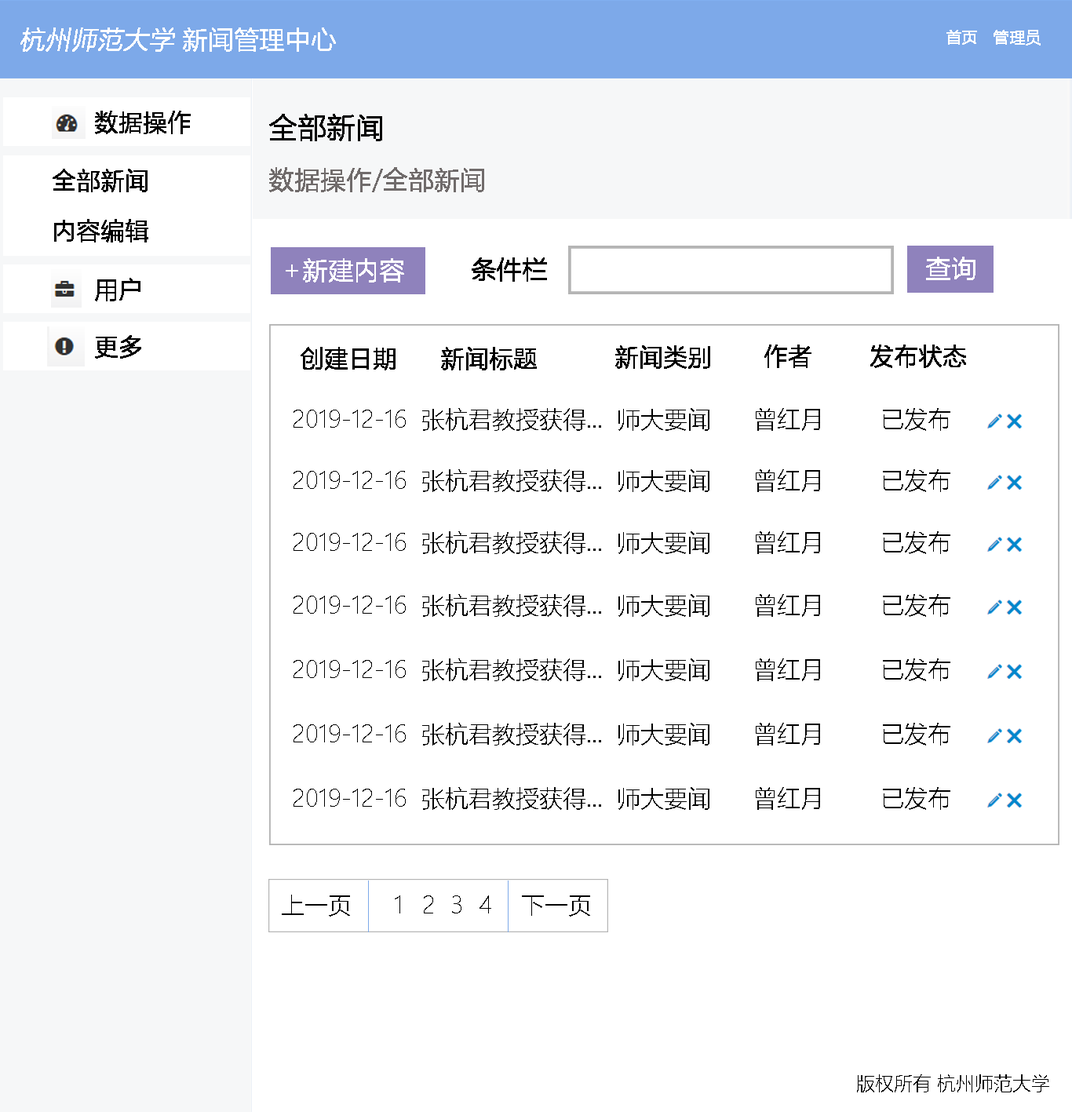
<style>
.page{position:relative;width:1072px;height:1112px;background:#ffffff}
.page>*{position:absolute;margin:0}
.t1{font:25.1px "MicrosoftYaHeiLight";color:#ffffff;font-weight:bold;font-style:italic}
.t2{font:25.1px "MicrosoftYaHeiLight";color:#ffffff;font-weight:bold}
.t3{font:15.7px "MicrosoftYaHeiLight";color:#ffffff;font-weight:bold}
.t4{font:23.5px "MicrosoftYaHeiLight";color:#000000;font-weight:bold}
.t5{font:28.3px "MicrosoftYaHeiLight";color:#000000;font-weight:bold}
.t6{font:25.1px "MicrosoftYaHeiLight";color:#706b6b;font-weight:bold}
.t7{font:25.1px "MicrosoftYaHeiLight";color:#000000;font-weight:bold}
.t8{font:23.5px "MicrosoftYaHeiLight";color:#000000}
.t9{font:18.8px "MicrosoftYaHeiLight";color:#000000}
</style>
<div class="page">
<p class="t1" style="left:20px;top:27px;width:316px;height:25px">杭州师范大学 <span class="t2">新闻管理中心</span></p>
<p class="t3" style="left:947px;top:30px;width:94px;height:16px">首页   管理员</p>
<p class="t4" style="left:95px;top:111px;width:96px;height:23px">数据操作</p>
<p class="t5" style="left:269px;top:114px;width:113px;height:27px">全部新闻</p>
<p class="t4" style="left:53px;top:169px;width:95px;height:23px">全部新闻</p>
<p class="t6" style="left:269px;top:167px;width:215px;height:25px">数据操作/全部新闻</p>
<p class="t4" style="left:54px;top:219px;width:94px;height:24px">内容编辑</p>
<p class="t7" style="left:472px;top:257px;width:75px;height:25px">条件栏</p>
<p class="t2" style="left:926px;top:257px;width:50px;height:23px">查询</p>
<p class="t2" style="left:286px;top:258px;width:118px;height:25px">+新建内容</p>
<p class="t4" style="left:95px;top:278px;width:45px;height:23px">用户</p>
<p class="t4" style="left:95px;top:335px;width:46px;height:24px">更多</p>
<p class="t4" style="left:301px;top:347px;width:95px;height:23px">创建日期</p>
<p class="t4" style="left:441px;top:347px;width:96px;height:23px">新闻标题</p>
<p class="t4" style="left:615px;top:345px;width:95px;height:24px">新闻类别</p>
<p class="t4" style="left:764px;top:345px;width:48px;height:23px">作者</p>
<p class="t4" style="left:870px;top:345px;width:96px;height:23px">发布状态</p>
<p class="t8" style="left:294px;top:408px;width:656px;height:23px">2019-12-16  张杭君教授获得...  师大要闻      曾红月        已发布</p>
<p class="t8" style="left:294px;top:469px;width:656px;height:23px">2019-12-16  张杭君教授获得...  师大要闻      曾红月        已发布</p>
<p class="t8" style="left:294px;top:531px;width:656px;height:23px">2019-12-16  张杭君教授获得...  师大要闻      曾红月        已发布</p>
<p class="t8" style="left:294px;top:594px;width:656px;height:23px">2019-12-16  张杭君教授获得...  师大要闻      曾红月        已发布</p>
<p class="t8" style="left:294px;top:659px;width:656px;height:22px">2019-12-16  张杭君教授获得...  师大要闻      曾红月        已发布</p>
<p class="t8" style="left:294px;top:723px;width:656px;height:23px">2019-12-16  张杭君教授获得...  师大要闻      曾红月        已发布</p>
<p class="t8" style="left:294px;top:787px;width:656px;height:23px">2019-12-16  张杭君教授获得...  师大要闻      曾红月        已发布</p>
<p class="t8" style="left:282px;top:895px;width:308px;height:22px">上一页   1 2 3 4   下一页</p>
<p class="t9" style="left:857px;top:1075px;width:192px;height:18px">版权所有 杭州师范大学</p>
</div>
